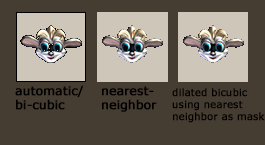
<style>
.page{position:relative;width:265px;height:145px;background:#453c32}
.page>*{position:absolute;margin:0}
.t1{font:12px "Verdana";color:#000000;font-weight:bold}
.t2{font:9.9px "Verdana";color:#000000;font-weight:bold}
</style>
<div class="page">
<p class="t1" style="left:15px;top:85px;width:69px;height:25px">automatic/<br>bi-cubic</p>
<p class="t1" style="left:102px;top:86px;width:55px;height:26px">nearest-<br>neighbor</p>
<p class="t2" style="left:172px;top:88px;width:93px;height:35px">dilated bicubic<br>using nearest neighbor as mask</p>
</div>
